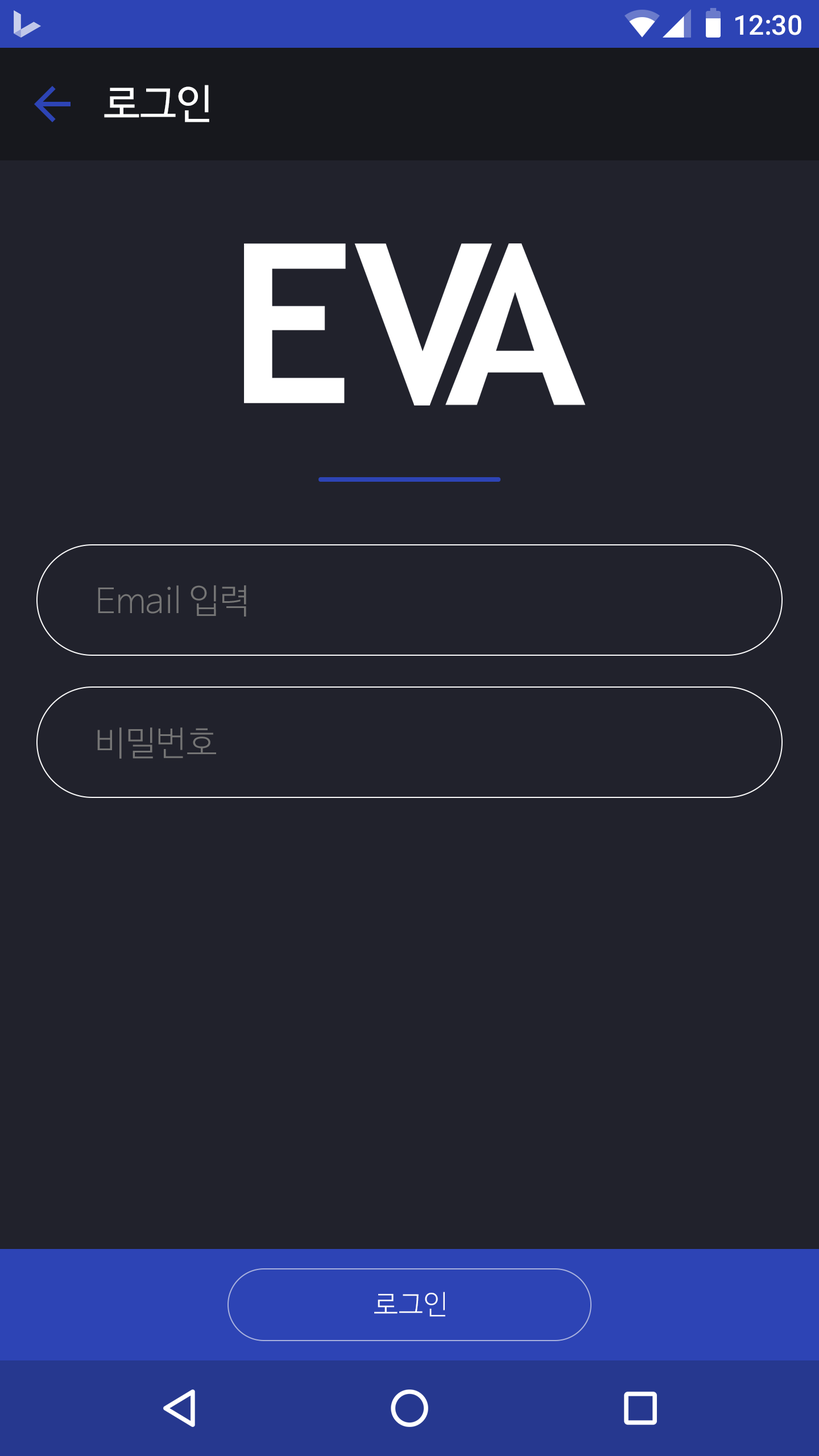
<style>
.page{position:relative;width:819px;height:1456px;background:#21222c}
.page>*{position:absolute;margin:0}
.t1{font:27.3px "Roboto-Medium";color:#ffffff}
.t2{font:40.9px "NanumBarunGothic";color:#ffffff}
.t3{font:34.1px "NanumBarunGothicLight";color:#757575}
.t4{font:27.3px "NanumBarunGothicLight";letter-spacing:0.025em;color:#ffffff}
</style>
<div class="page">
<p class="t1" style="left:735px;top:15px;width:66px;height:20px">12:30</p>
<p class="t2" style="left:104px;top:85px;width:105px;height:37px">로그인</p>
<p class="t3" style="left:98px;top:585px;width:148px;height:32px">Email 입력</p>
<p class="t3" style="left:97px;top:727px;width:119px;height:32px">비밀번호</p>
<p class="t4" style="left:374px;top:1292px;width:71px;height:25px">로그인</p>
</div>
